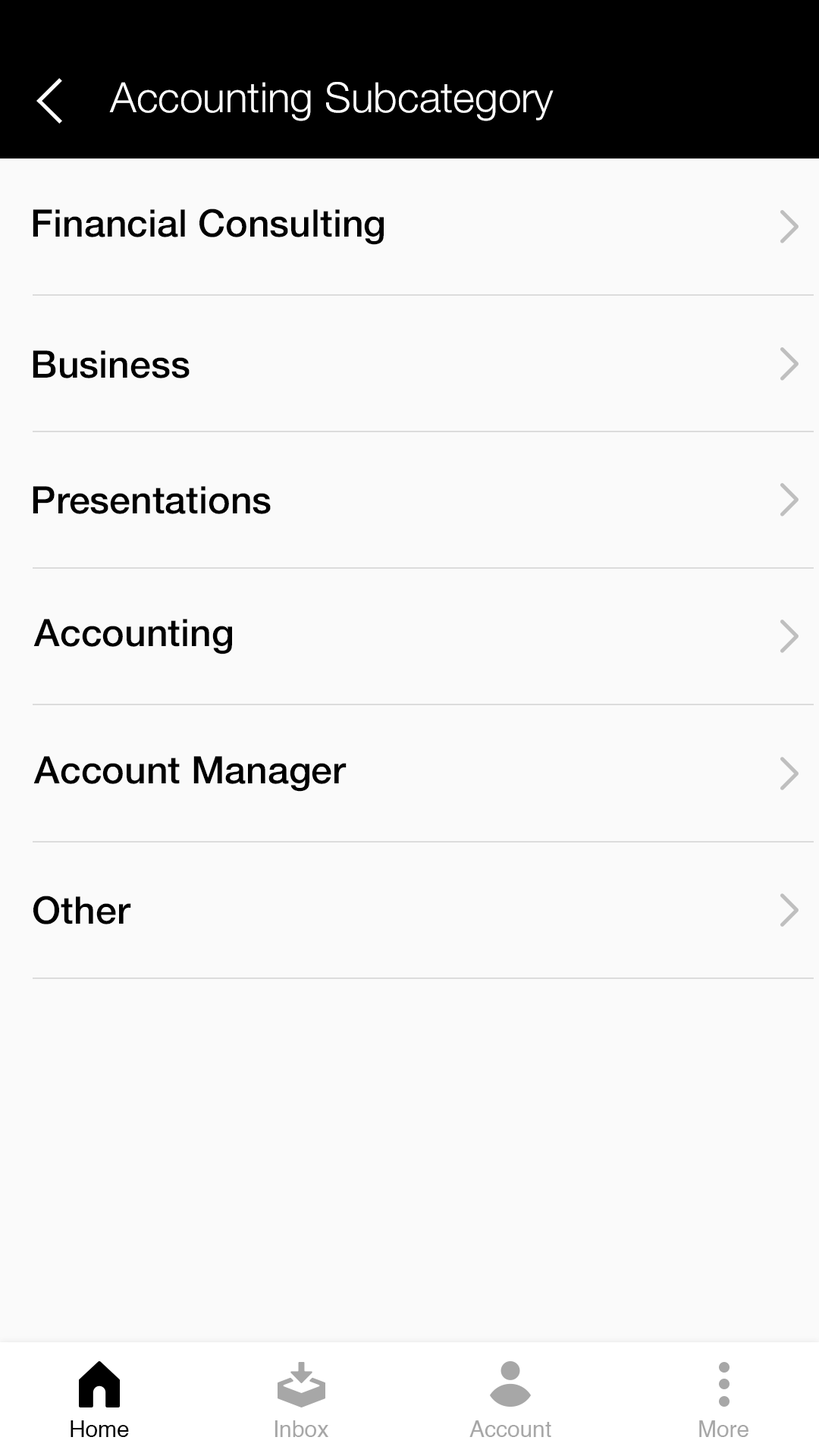
<style>
.page{position:relative;width:819px;height:1456px;background:#fafafa}
.page>*{position:absolute;margin:0}
.t1{font:41.7px "HelveticaNeue-Light";color:#ffffff}
.t2{font:37.9px "HelveticaNeue-Medium";color:#000000}
.t3{font:22.7px "Helvetica";color:#000000}
.t4{font:22.7px "Helvetica";color:#a7a7a7}
</style>
<div class="page">
<p class="t1" style="left:109px;top:82px;width:445px;height:39px">Accounting Subcategory</p>
<p class="t2" style="left:33px;top:209px;width:351px;height:36px">Financial Consulting</p>
<p class="t2" style="left:33px;top:350px;width:157px;height:28px">Business</p>
<p class="t2" style="left:33px;top:486px;width:238px;height:28px">Presentations</p>
<p class="t2" style="left:33px;top:619px;width:199px;height:35px">Accounting</p>
<p class="t2" style="left:33px;top:756px;width:314px;height:36px">Account Manager</p>
<p class="t2" style="left:33px;top:896px;width:98px;height:28px">Other</p>
<p class="t3" style="left:71px;top:1420px;width:58px;height:17px">Home</p>
<p class="t4" style="left:275px;top:1420px;width:53px;height:17px">Inbox</p>
<p class="t4" style="left:469px;top:1420px;width:82px;height:17px">Account</p>
<p class="t4" style="left:699px;top:1420px;width:49px;height:17px">More</p>
</div>
